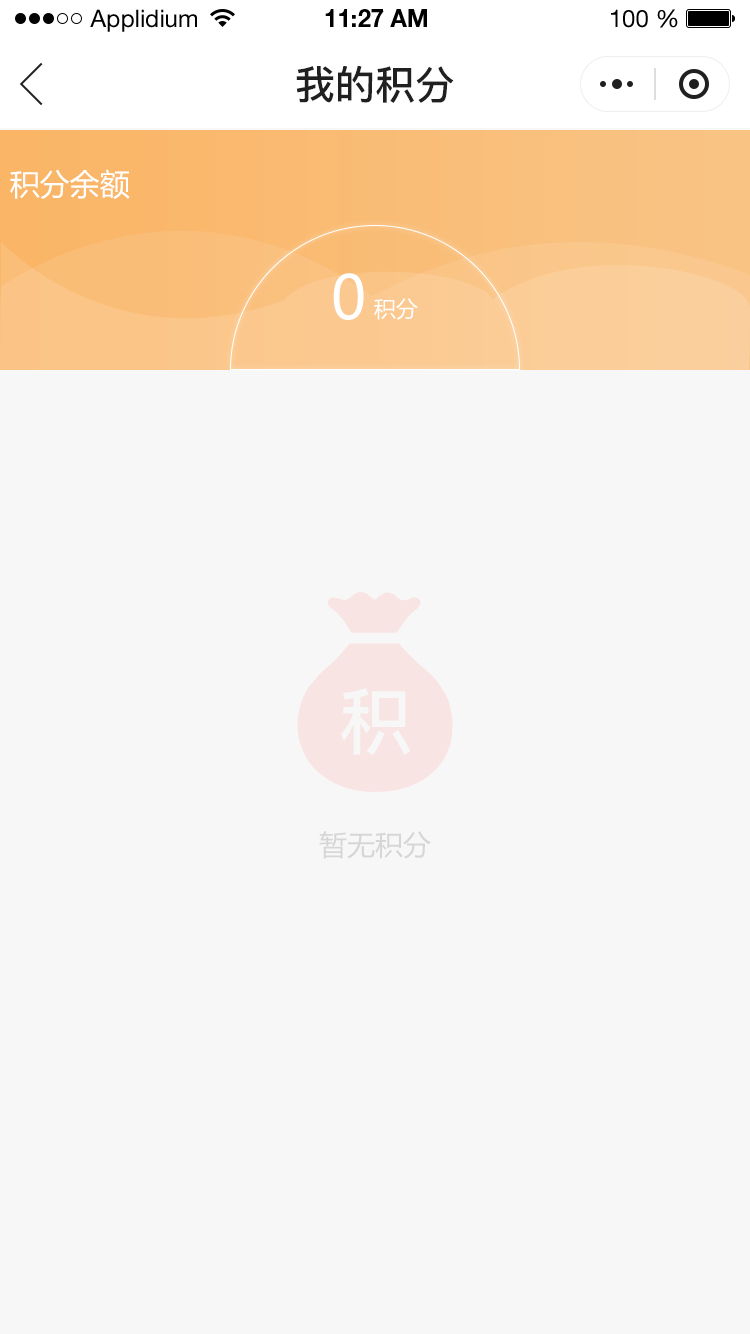
<style>
.page{position:relative;width:750px;height:1334px;background:#f7f7f7}
.page>*{position:absolute;margin:0}
.t1{font:24px "HelveticaNeueLTStd-Roman";color:#000000}
.t2{font:24px "HelveticaNeueLTStd-Bd";color:#000000}
.t3{font:40px "PingFang-SC-Bold";color:#202020;text-transform:uppercase}
.t4{font:30px "MicrosoftYaHei";color:#ffffff;text-transform:uppercase}
.t5{font:60px "MicrosoftYaHei";color:#ffffff;text-transform:uppercase}
.t6{font:22px "MicrosoftYaHei";color:#ffffff;text-transform:uppercase}
.t7{font:28px "MicrosoftYaHei";color:#d6d6d6;text-transform:uppercase}
</style>
<div class="page">
<p class="t1" style="left:90px;top:9px;width:107px;height:23px">Applidium</p>
<p class="t2" style="left:325px;top:9px;width:102px;height:18px">11:27 AM</p>
<p class="t1" style="left:611px;top:9px;width:67px;height:19px">100 %</p>
<p class="t3" style="left:296px;top:65px;width:158px;height:38px">我的积分</p>
<p class="t4" style="left:10px;top:169px;width:120px;height:30px">积分余额</p>
<p class="t5" style="left:333px;top:273px;width:31px;height:47px">0</p>
<p class="t6" style="left:374px;top:298px;width:44px;height:22px">积分</p>
<p class="t7" style="left:319px;top:831px;width:112px;height:28px">暂无积分</p>
</div>
